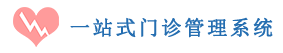
<style>
.page{position:relative;width:283px;height:53px;background:#ffffff}
.page>*{position:absolute;margin:0}
.t1{font:20.3px "SimSun";letter-spacing:0.1em;color:#256eb1;font-weight:bold}
</style>
<div class="page">
<p class="t1" style="left:70px;top:17px;width:203px;height:21px">一站式门诊管理系统</p>
</div>
